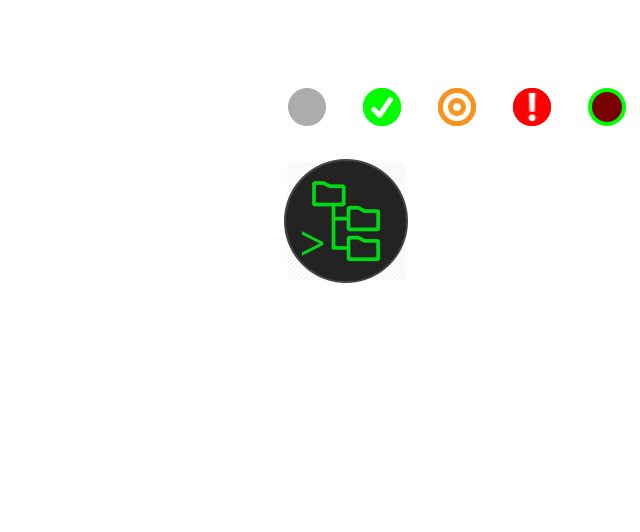
<style>
.page{position:relative;width:640px;height:532px;background:#ffffff}
.page>*{position:absolute;margin:0}
.t1{font:46px "MyriadPro-Regular";color:#00da15}
</style>
<div class="page">
<p class="t1" style="left:301px;top:231px;width:23px;height:25px">&gt;</p>
</div>
